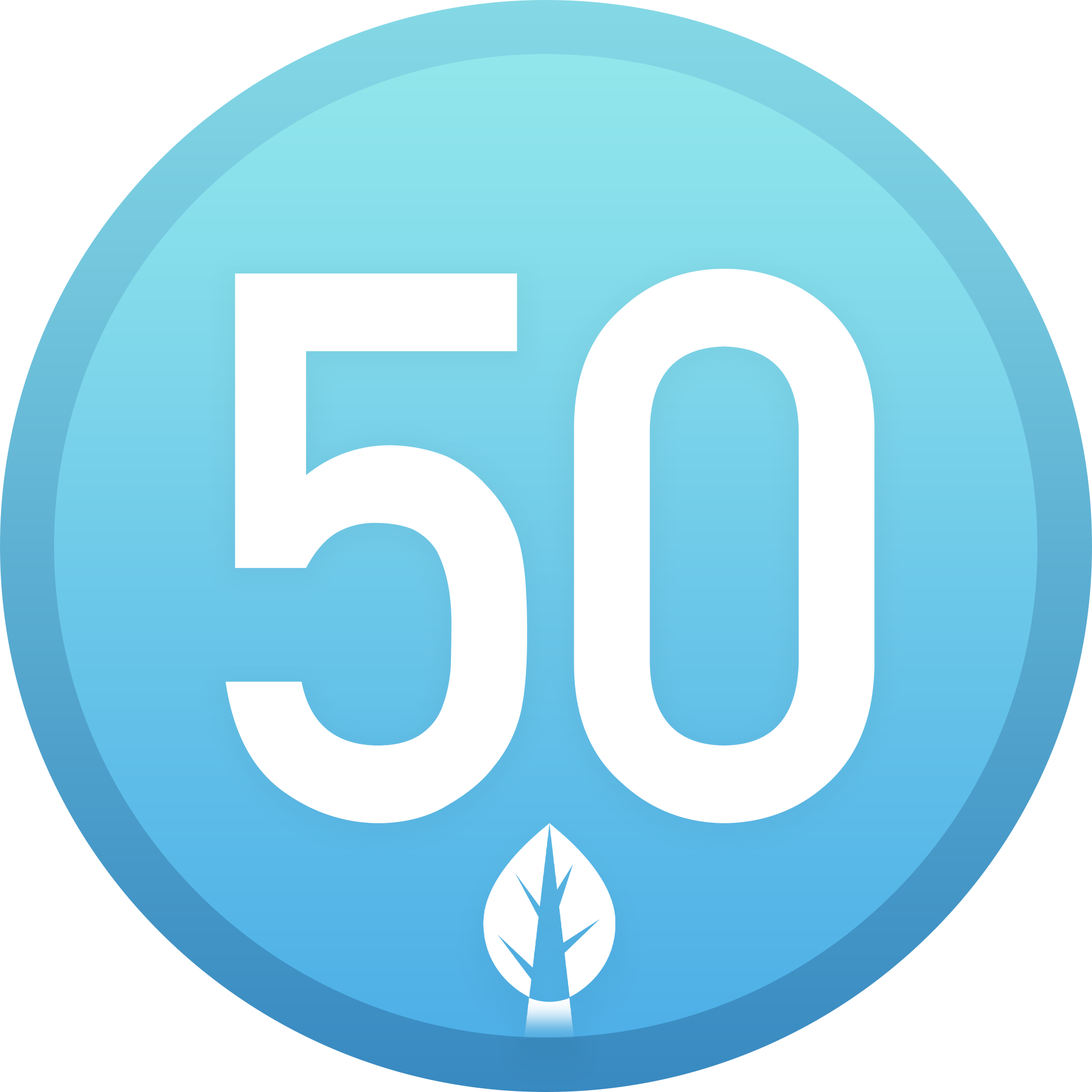
<style>
.page{position:relative;width:1092px;height:1092px;background:#ffffff}
.page>*{position:absolute;margin:0}
.t1{font:765.6px "DINAlternate-Bold";letter-spacing:-0.025em;color:#ffffff}
</style>
<div class="page">
<p class="t1" style="left:225px;top:269px;width:650px;height:554px">50</p>
</div>
